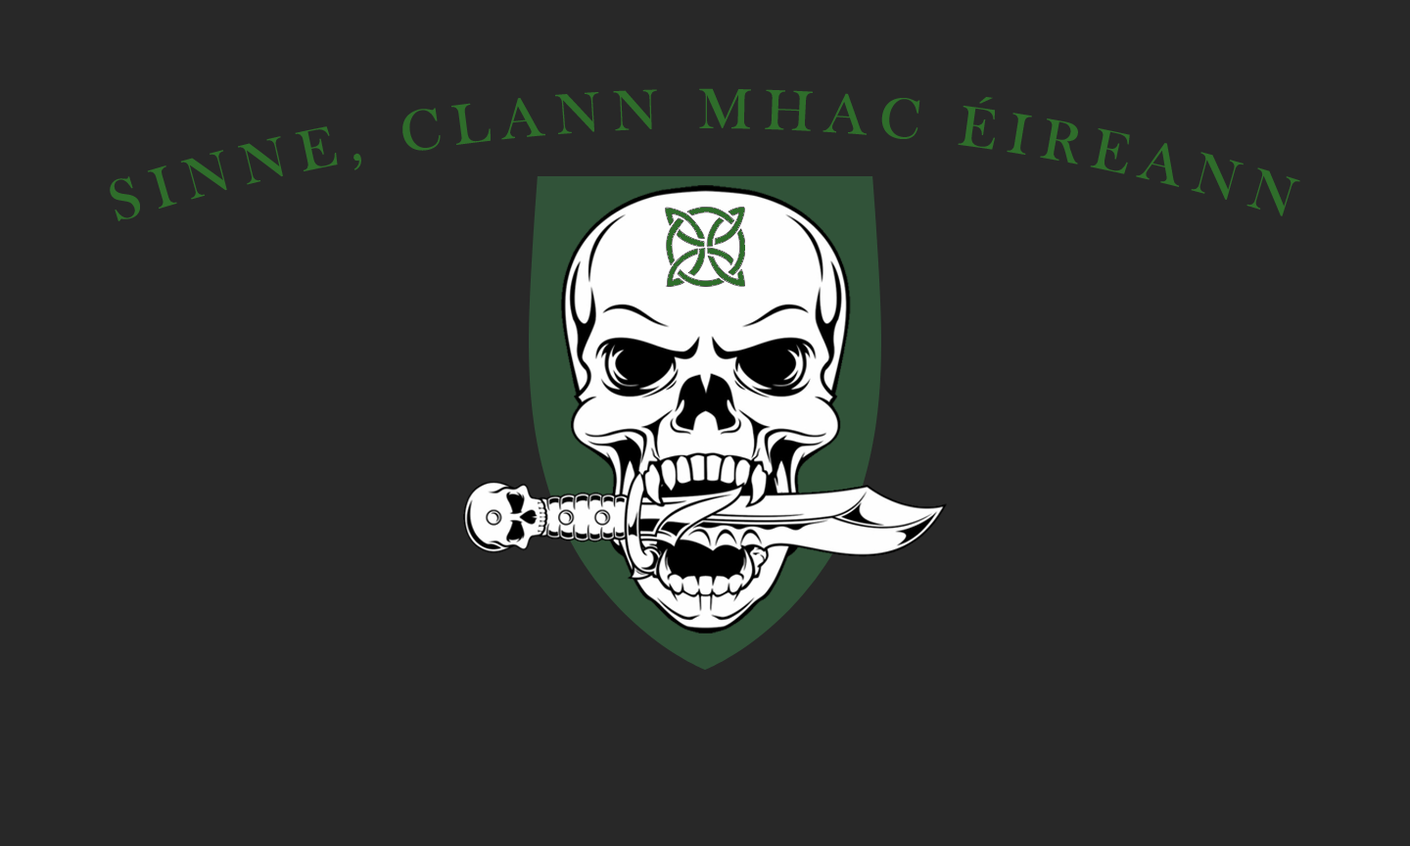
<style>
.page{position:relative;width:1410px;height:846px;background:#282828}
.page>*{position:absolute;margin:0}
.t1{font:58.7px/74.4px "BaskOldFace";letter-spacing:0.2em;color:#2f6e2b}
</style>
<div class="page">
<p class="t1" style="left:110px;top:88px;width:1190px;height:133px">SINNE, CLANN MHAC ÉIREANN</p>
</div>
